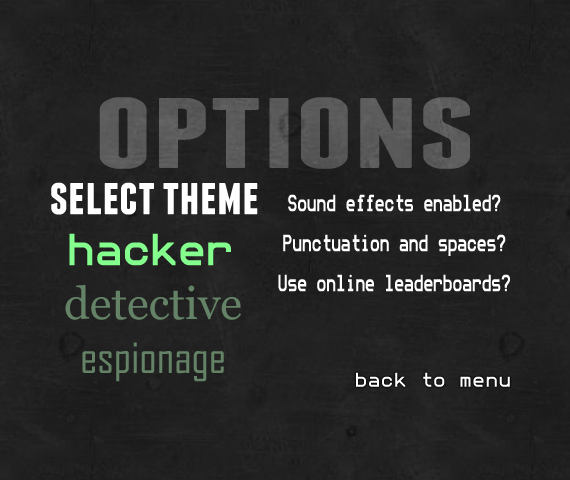
<style>
.page{position:relative;width:570px;height:480px}
.page>*{position:absolute;margin:0}
.t1{font:100px "Franchise-Bold";color:#5a5a5a;scale:1.6 1}
.t2{font:52px "Franchise-Bold";color:#ffffff}
.t3{font:21px/40px "monoMMM5-Regular";color:#ffffff;font-weight:bold;scale:0.67 1}
.t4{font:45px/54px "Georgia";color:#648266}
.t5{font:40px/54px "monoMMM5-Regular";color:#84ff8d;font-weight:bold}
.t6{font:46px/54px "AgencyFB-Reg";color:#648266}
.t7{font:18px "monoMMM5-Regular";letter-spacing:0.06em;color:#ffffff}
</style>
<div class="page">
<p class="t1" style="left:99px;top:97px;width:371px;height:72px">OPTIONS</p>
<p class="t2" style="left:51px;top:182px;width:207px;height:33px">select theme</p>
<p class="t3" style="left:278px;top:194px;width:232px;height:98px;text-align:center">Sound effects enabled?<br>Punctuation and spaces?<br>Use online leaderboards?</p>
<p class="t4" style="left:65px;top:233px;width:176px;height:149px;text-align:center"><span class="t5">hacker<br></span>detective<br><span class="t6">espionage</span></p>
<p class="t7" style="left:356px;top:372px;width:154px;height:15px">back to menu</p>
</div>
